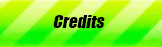
<style>
.page{position:relative;width:162px;height:47px}
.page>*{position:absolute;margin:0}
.t1{font:17px "Impact";color:#000000;font-style:italic}
</style>
<div class="page">
<p class="t1" style="left:53px;top:15px;width:52px;height:13px">Credits</p>
</div>
